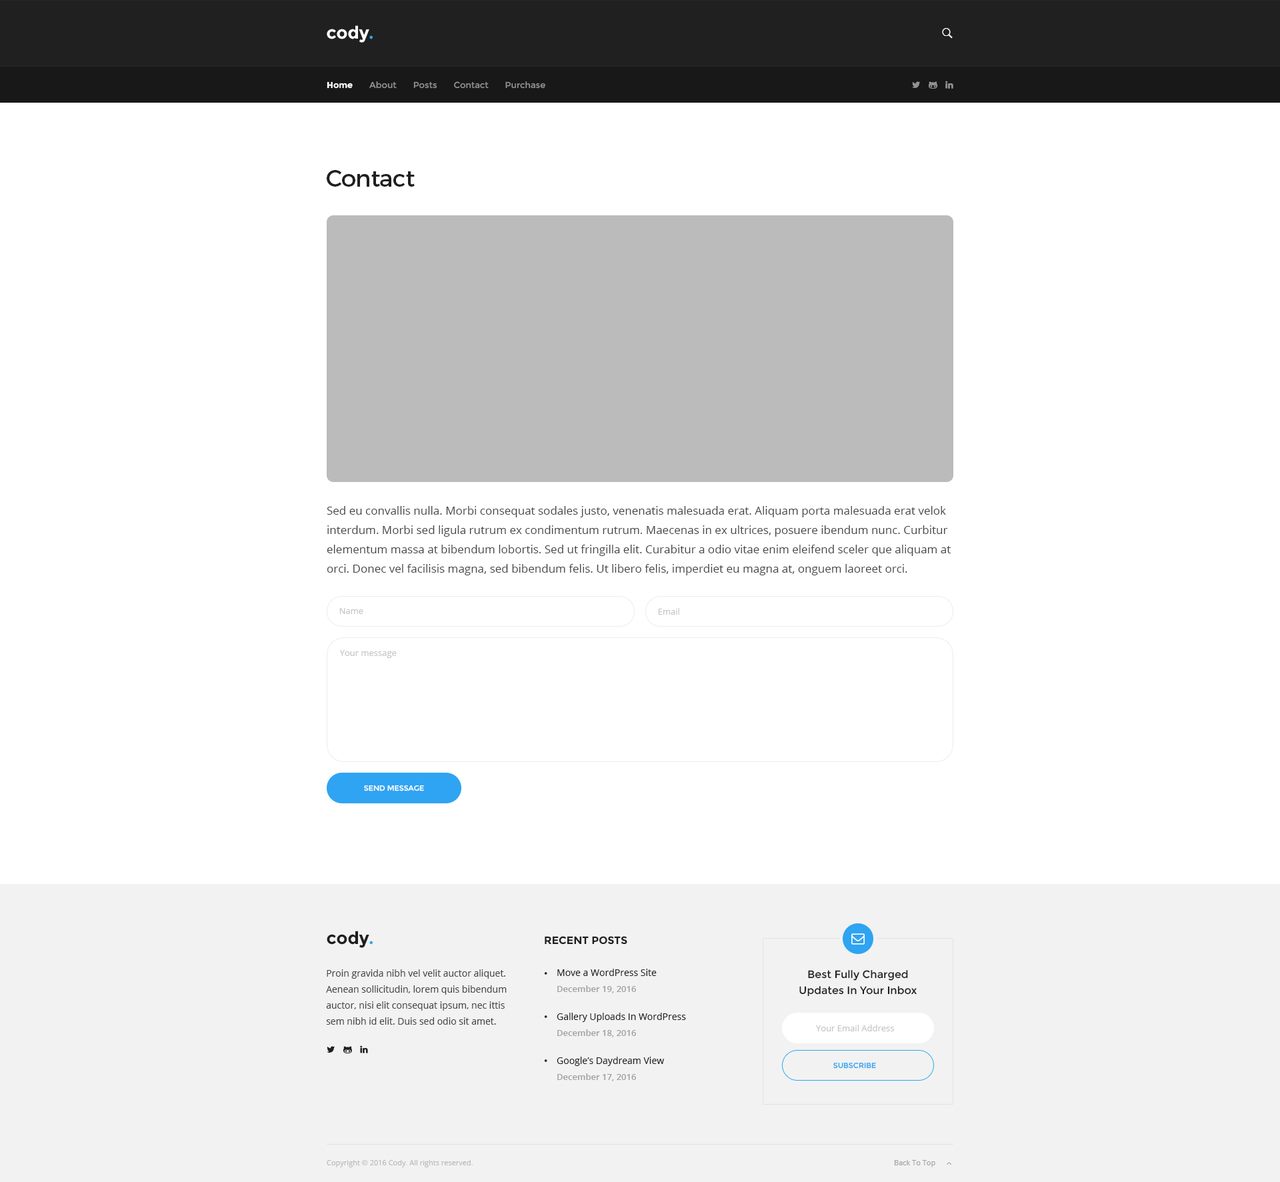
<style>
.page{position:relative;width:1280px;height:1182px;background:#ffffff}
.page>*{position:absolute;margin:0}
.t1{font:17.3px "Montserrat-Bold";color:#ffffff}
.t2{font:17.3px "Montserrat-Bold";color:#2fa4f2}
.t3{font:8.7px "Montserrat-Bold";color:#ffffff}
.t4{font:8.7px "Montserrat-Regular";color:#929292}
.t5{font:23.3px "Montserrat-Regular";letter-spacing:-0.02em;color:#1e1f1f}
.t6{font:11.3px/19.3px "OpenSans";color:#454647}
.t7{font:8.7px "OpenSans";color:#c5c5c5}
.t8{font:7.3px "Montserrat-Regular";color:#ffffff;text-transform:uppercase}
.t9{font:17.3px "Montserrat-Bold";color:#1e1f1f}
.t10{font:10.7px "Montserrat-Bold";color:#1e1f1f;text-transform:uppercase}
.t11{font:9.3px/16px "OpenSans";color:#454647}
.t12{font:9.3px/16px "OpenSans";color:#1e1f1f}
.t13{font:8.7px/16px "OpenSans-Semibold";color:#a1a1a1}
.t14{font:10.7px/16px "Montserrat-Regular";color:#1e1f1f}
.t15{font:7.3px "Montserrat-Regular";color:#2fa4f2;text-transform:uppercase}
.t16{font:7.3px "OpenSans";color:#b9b9b9}
.t17{font:7.3px "OpenSans";color:#a1a1a1}
</style>
<div class="page">
<p class="t1" style="left:327px;top:25px;width:46px;height:18px">cody<span class="t2">.</span></p>
<p class="t3" style="left:327px;top:81px;width:26px;height:8px">Home</p>
<p class="t4" style="left:369px;top:81px;width:176px;height:8px">About       Posts       Contact       Purchase</p>
<p class="t5" style="left:327px;top:170px;width:88px;height:17px">Contact</p>
<p class="t6" style="left:327px;top:506px;width:624px;height:69px">Sed eu convallis nulla. Morbi consequat sodales justo, venenatis malesuada erat. Aliquam porta malesuada erat velok interdum. Morbi sed ligula rutrum ex condimentum rutrum. Maecenas in ex ultrices, posuere ibendum nunc. Curbitur elementum massa at bibendum lobortis. Sed ut fringilla elit. Curabitur a odio vitae enim eleifend sceler que aliquam at orci. Donec vel facilisis magna, sed bibendum felis. Ut libero felis, imperdiet eu magna at, onguem laoreet orci.</p>
<p class="t7" style="left:339px;top:608px;width:24px;height:6px">Name</p>
<p class="t7" style="left:658px;top:608px;width:21px;height:7px">Email</p>
<p class="t7" style="left:339px;top:650px;width:58px;height:8px">Your message</p>
<p class="t8" style="left:364px;top:785px;width:60px;height:6px">Send Message</p>
<p class="t9" style="left:327px;top:931px;width:46px;height:17px">cody<span class="t2">.</span></p>
<p class="t10" style="left:545px;top:936px;width:82px;height:9px">Recent Posts</p>
<p class="t11" style="left:326px;top:969px;width:181px;height:56px">Proin gravida nibh vel velit auctor aliquet. Aenean sollicitudin, lorem quis bibendum auctor, nisi elit consequat ipsum, nec ittis sem nibh id elit. Duis sed odio sit amet.</p>
<p class="t12" style="left:557px;top:969px;width:100px;height:24px">Move a WordPress Site<br><span class="t13">December 19, 2016</span></p>
<p class="t14" style="left:799px;top:970px;width:118px;height:27px;text-align:center">Best Fully Charged <br>Updates In Your Inbox From Cody</p>
<p class="t12" style="left:557px;top:1013px;width:129px;height:24px">Gallery Uploads In WordPress<br><span class="t13">December 18, 2016</span></p>
<p class="t7" style="left:816px;top:1025px;width:78px;height:6px">Your Email Address</p>
<p class="t12" style="left:557px;top:1057px;width:107px;height:24px">Google’s Daydream View<br><span class="t13">December 17, 2016</span></p>
<p class="t15" style="left:833px;top:1063px;width:43px;height:6px">Subscribe</p>
<p class="t16" style="left:327px;top:1160px;width:146px;height:7px">Copyright © 2016 Cody. All rights reserved.</p>
<p class="t17" style="left:894px;top:1160px;width:41px;height:7px">Back To Top</p>
</div>
